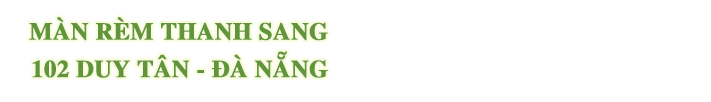
<style>
.page{position:relative;width:711px;height:102px;background:#ffffff}
.page>*{position:absolute;margin:0}
.t1{font:24.1px/37.6px "UTMTimesBold";color:#629539;font-weight:bold}
</style>
<div class="page">
<p class="t1" style="left:29px;top:17px;width:299px;height:61px;text-align:right">MÀN RÈM THANH SANG<br>102 DUY TÂN - ĐÀ NẴNG</p>
</div>
